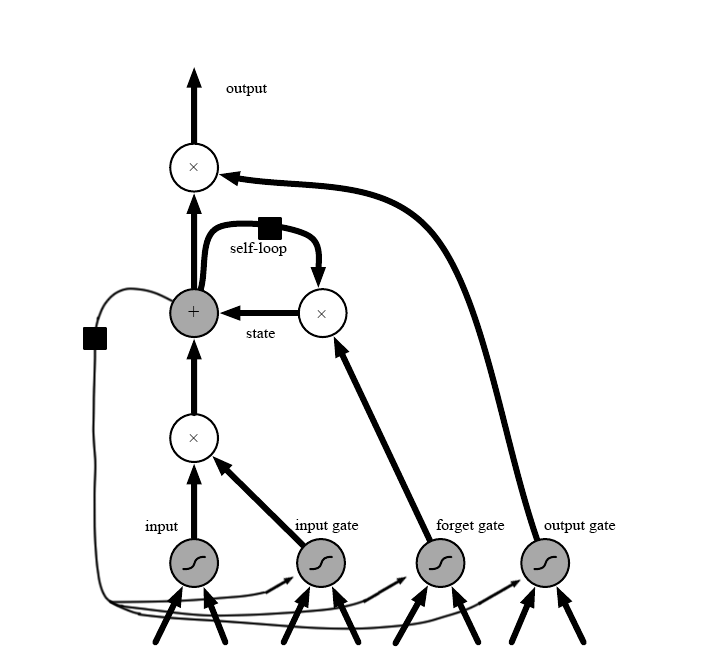
<style>
.page{position:relative;width:719px;height:663px;background:#ffffff}
.page>*{position:absolute;margin:0}
.t1{font:16px "TimesNewRomanPSMT";color:#000000}
.t2{font:20px "TimesNewRomanPSMT"}
.t3{font:20px "TimesNewRomanPSMT";color:#000000}
</style>
<div class="page">
<p class="t1" style="left:226px;top:84px;width:41px;height:12px">output</p>
<p class="t2" style="left:189px;top:163px;width:9px;height:8px">×</p>
<p class="t1" style="left:230px;top:242px;width:57px;height:14px">self-loop</p>
<p class="t3" style="left:188px;top:306px;width:11px;height:11px">+</p>
<p class="t2" style="left:317px;top:310px;width:9px;height:8px">×</p>
<p class="t1" style="left:246px;top:329px;width:29px;height:9px">state</p>
<p class="t2" style="left:189px;top:434px;width:9px;height:8px">×</p>
<p class="t1" style="left:145px;top:520px;width:33px;height:14px">input</p>
<p class="t1" style="left:295px;top:519px;width:64px;height:14px">input gate</p>
<p class="t1" style="left:436px;top:519px;width:69px;height:14px">forget gate</p>
<p class="t1" style="left:544px;top:521px;width:72px;height:12px">output gate</p>
</div>
